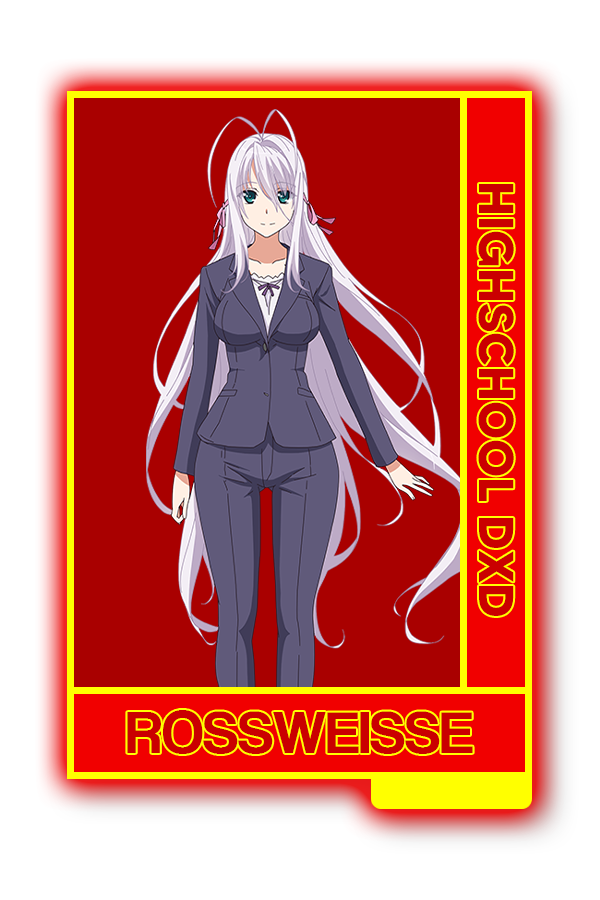
<style>
.page{position:relative;width:600px;height:900px;background:#a90000}
.page>*{position:absolute;margin:0}
.t1{font:48.8px "MADETOMMY-Bold";color:#ca0000}
.t2{font:61.7px "CoolveticaRg-Regular";color:#ca0000}
</style>
<div class="page">
<p class="t1" style="left:478px;top:184px;width:36px;height:432px;rotate:90deg">HIGHSCHOOL DXD</p>
<p class="t2" style="left:127px;top:710px;width:346px;height:44px">ROSSWEISSE</p>
</div>
